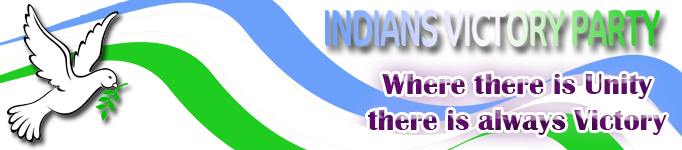
<style>
.page{position:relative;width:682px;height:150px;background:#ffffff}
.page>*{position:absolute;margin:0}
.t1{font:30px "BritannicBold"}
</style>
<div class="page">
<p class="t1" style="left:368px;top:73px;width:299px;height:62px;text-align:center">Where there is Unity<br>there is always Victory</p>
</div>
